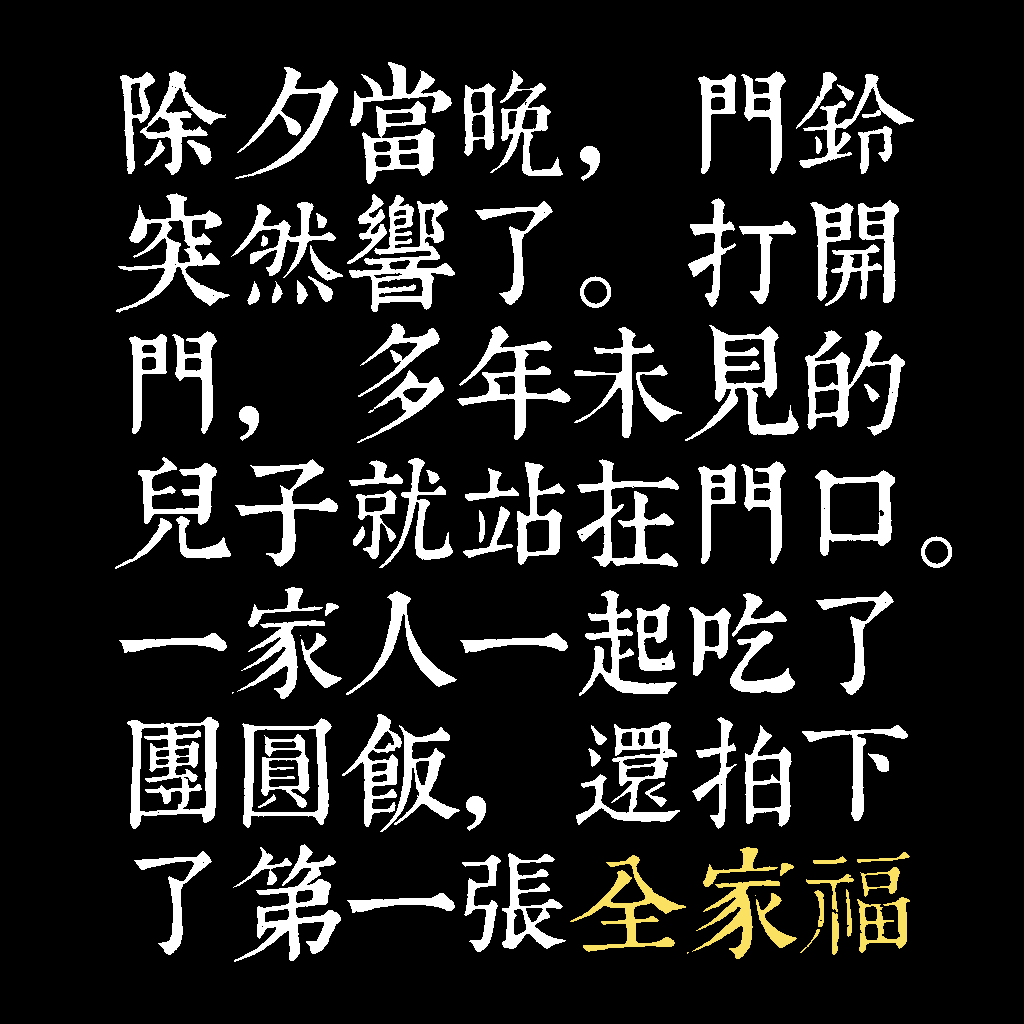
<style>
.page{position:relative;width:1024px;height:1024px;background:#000000}
.page>*{position:absolute;margin:0}
.t1{font:116px/130px "TpldKhangXiDictTrial";letter-spacing:-0.02em;color:#ffffff}
.t2{font:116px/130px "TpldKhangXiDictTrial";letter-spacing:-0.02em;color:#fbe161}
</style>
<div class="page">
<p class="t1" style="left:115px;top:62px;width:837px;height:900px">除夕當晚，門鈴<br>突然響了。打開<br>門，多年未見的<br>兒子就站在門口。<br>一家人一起吃了<br>團圓飯，還拍下<br>了第一張<span class="t2">全家福</span></p>
</div>
